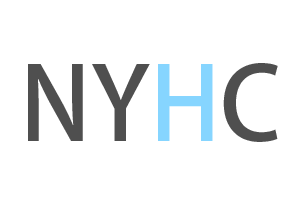
<style>
.page{position:relative;width:300px;height:200px;background:#ffffff}
.page>*{position:absolute;margin:0}
.t1{font:100px "AdobeFanHeitiStd-Bold";color:#4f4f4f}
.t2{font:100px "AdobeFanHeitiStd-Bold";color:#86d5ff}
</style>
<div class="page">
<p class="t1" style="left:28px;top:63px;width:250px;height:79px">NY<span class="t2">H</span>C</p>
</div>
